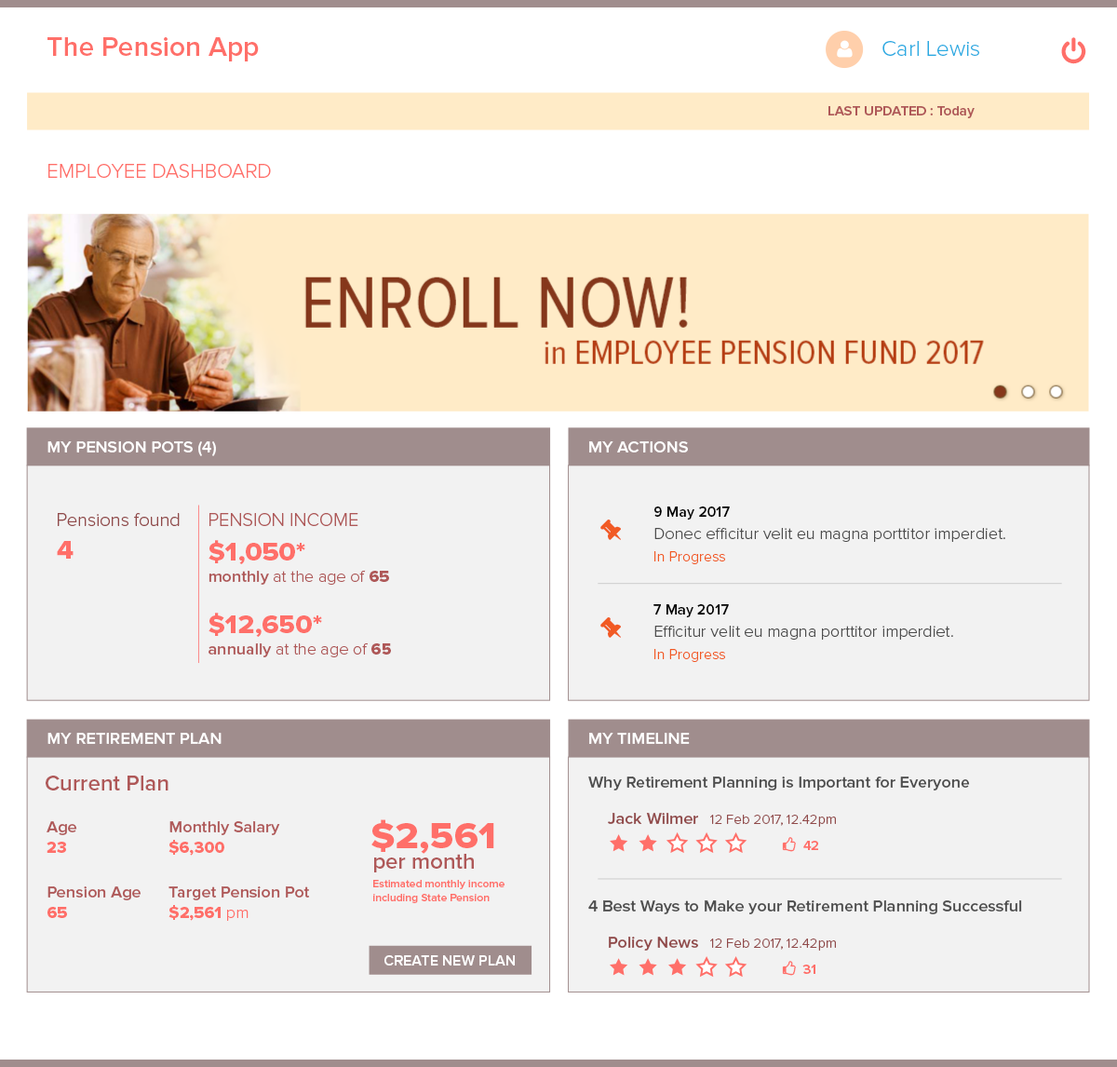
<style>
.page{position:relative;width:1117px;height:1067px;background:#f2f2f2}
.page>*{position:absolute;margin:0}
.t1{font:27.9px "ProximaNova-Semibold";color:#ff6f69}
.t2{font:22.3px "ProximaNova-Light";color:#29abe2}
.t3{font:14px "ProximaNova-Semibold";color:#af5858}
.t4{font:20.5px "ProximaNova-Light";color:#ff6f69}
.t5{font:16.8px "ProximaNova-Semibold";color:#ffffff}
.t6{font:14.9px "ProximaNova-Semibold";color:#000000}
.t7{font:18.6px "ProximaNova-Light";color:#914a4a}
.t8{font:18.6px "ProximaNova-Light";color:#af5858}
.t9{font:16.8px "ProximaNova-Light";color:#4d4d4d}
.t10{font:26.1px "ProximaNova-Extrabld";color:#ff6f69;scale:1.06 1}
.t11{font:14.9px "ProximaNova-Light";color:#f15a24}
.t12{font:16.8px "ProximaNova-Light";color:#af5858}
.t13{font:16.8px "ProximaNova-Semibold";color:#af5858}
.t14{font:16.8px "ProximaNova-Extrabld";color:#af5858}
.t15{font:22.3px "ProximaNova-Semibold";color:#af5858}
.t16{font:16.8px "ProximaNova-Semibold";color:#4d4d4d}
.t17{font:16.8px "ProximaNova-Extrabld";color:#ff6f69}
.t18{font:37.2px "ProximaNova-Extrabld";color:#ff6f69;scale:1.06 1}
.t19{font:16.8px "ProximaNova-Semibold";color:#914a4a}
.t20{font:14px "ProximaNova-Light";color:#914a4a}
.t21{font:14px "ProximaNova-Semibold";color:#ff6f69}
.t22{font:11.2px "ProximaNova-Semibold";color:#ff6f69}
.t23{font:16.8px "ProximaNova-Light";color:#ff6f69}
.t24{font:14.9px "ProximaNova-Semibold";color:#ffffff}
</style>
<div class="page">
<p class="t1" style="left:47px;top:37px;width:212px;height:24px">The Pension App</p>
<p class="t2" style="left:883px;top:41px;width:97px;height:15px">Carl Lewis</p>
<p class="t3" style="left:829px;top:106px;width:146px;height:12px">LAST UPDATED : Today</p>
<p class="t4" style="left:48px;top:164px;width:223px;height:14px">EMPLOYEE DASHBOARD</p>
<p class="t5" style="left:47px;top:441px;width:169px;height:15px">MY PENSION POTS (4)</p>
<p class="t5" style="left:589px;top:441px;width:99px;height:12px">MY ACTIONS</p>
<p class="t6" style="left:655px;top:507px;width:75px;height:13px">9 May 2017</p>
<p class="t7" style="left:58px;top:513px;width:122px;height:13px">Pensions found</p>
<p class="t8" style="left:210px;top:513px;width:149px;height:13px">PENSION INCOME</p>
<p class="t9" style="left:655px;top:528px;width:351px;height:14px">Donec efficitur velit eu magna porttitor imperdiet.</p>
<p class="t10" style="left:57px;top:541px;width:17px;height:18px">4</p>
<p class="t10" style="left:209px;top:540px;width:96px;height:24px">$1,050*</p>
<p class="t11" style="left:655px;top:551px;width:70px;height:13px">In Progress</p>
<p class="t12" style="left:209px;top:570px;width:180px;height:15px"><span class="t13">monthly</span> at the age of <span class="t14">65</span></p>
<p class="t6" style="left:654px;top:604px;width:75px;height:13px">7 May 2017</p>
<p class="t10" style="left:209px;top:613px;width:113px;height:24px">$12,650*</p>
<p class="t9" style="left:655px;top:626px;width:299px;height:14px">Efficitur velit eu magna porttitor imperdiet.</p>
<p class="t12" style="left:209px;top:643px;width:182px;height:14px"><span class="t13">annually</span> at the age of <span class="t14">65</span></p>
<p class="t11" style="left:655px;top:649px;width:70px;height:13px">In Progress</p>
<p class="t5" style="left:47px;top:733px;width:175px;height:11px">MY RETIREMENT PLAN</p>
<p class="t5" style="left:589px;top:733px;width:101px;height:11px">MY TIMELINE</p>
<p class="t15" style="left:46px;top:776px;width:123px;height:15px">Current Plan</p>
<p class="t16" style="left:589px;top:777px;width:381px;height:14px">Why Retirement Planning is Important for Everyone</p>
<p class="t13" style="left:47px;top:821px;width:30px;height:32px">Age<br><span class="t17">23</span></p>
<p class="t13" style="left:169px;top:821px;width:111px;height:35px">Monthly Salary<br><span class="t17">$6,300</span></p>
<p class="t18" style="left:372px;top:819px;width:122px;height:35px">$2,561</p>
<p class="t19" style="left:608px;top:813px;width:90px;height:11px">Jack Wilmer</p>
<p class="t20" style="left:710px;top:815px;width:126px;height:12px">12 Feb 2017, 12.42pm</p>
<p class="t21" style="left:804px;top:841px;width:15px;height:9px">42</p>
<p class="t15" style="left:374px;top:854px;width:100px;height:19px">per month</p>
<p class="t22" style="left:373px;top:880px;width:132px;height:23px">Estimated monthly income<br>including State Pension</p>
<p class="t13" style="left:47px;top:886px;width:94px;height:32px">Pension Age<br><span class="t17">65</span></p>
<p class="t13" style="left:169px;top:886px;width:141px;height:35px">Target Pension Pot<br><span class="t17">$2,561 </span><span class="t23">pm</span></p>
<p class="t16" style="left:589px;top:900px;width:433px;height:14px">4 Best Ways to Make your Retirement Planning Successful</p>
<p class="t19" style="left:609px;top:937px;width:89px;height:14px">Policy News</p>
<p class="t20" style="left:710px;top:939px;width:126px;height:12px">12 Feb 2017, 12.42pm</p>
<p class="t24" style="left:385px;top:955px;width:130px;height:11px">CREATE NEW PLAN</p>
<p class="t21" style="left:803px;top:965px;width:13px;height:9px">31</p>
</div>
